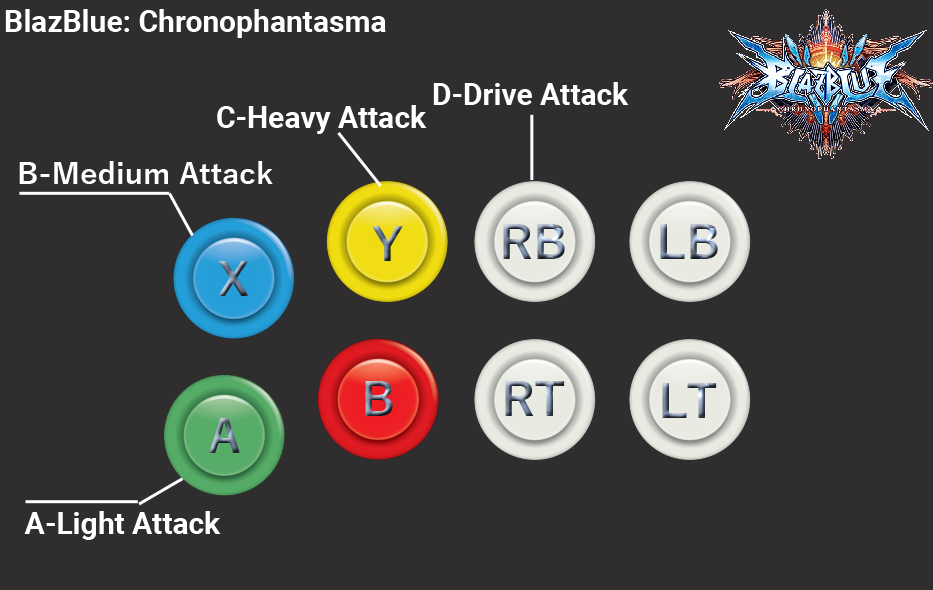
<style>
.page{position:relative;width:933px;height:590px;background:#2f2d2e}
.page>*{position:absolute;margin:0}
.t1{font:30px "Roboto-Bold";color:#ffffff}
.t2{font:30px "YuGothic-Bold";color:#ffffff}
</style>
<div class="page">
<p class="t1" style="left:5px;top:9px;width:381px;height:29px">BlazBlue: Chronophantasma</p>
<p class="t1" style="left:433px;top:82px;width:196px;height:23px">D-Drive Attack</p>
<p class="t1" style="left:217px;top:105px;width:210px;height:29px">C-Heavy Attack</p>
<p class="t2" style="left:19px;top:161px;width:254px;height:23px">B-Medium Attack</p>
<p class="t1" style="left:24px;top:511px;width:197px;height:29px">A-Light Attack</p>
</div>
